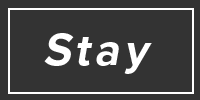
<style>
.page{position:relative;width:200px;height:100px;background:#333333}
.page>*{position:absolute;margin:0}
.t1{font:45.8px "ProximaNova-Bold";letter-spacing:0.1em;color:#ffffff;font-style:italic}
</style>
<div class="page">
<p class="t1" style="left:44px;top:33px;width:108px;height:41px">Stay</p>
</div>
